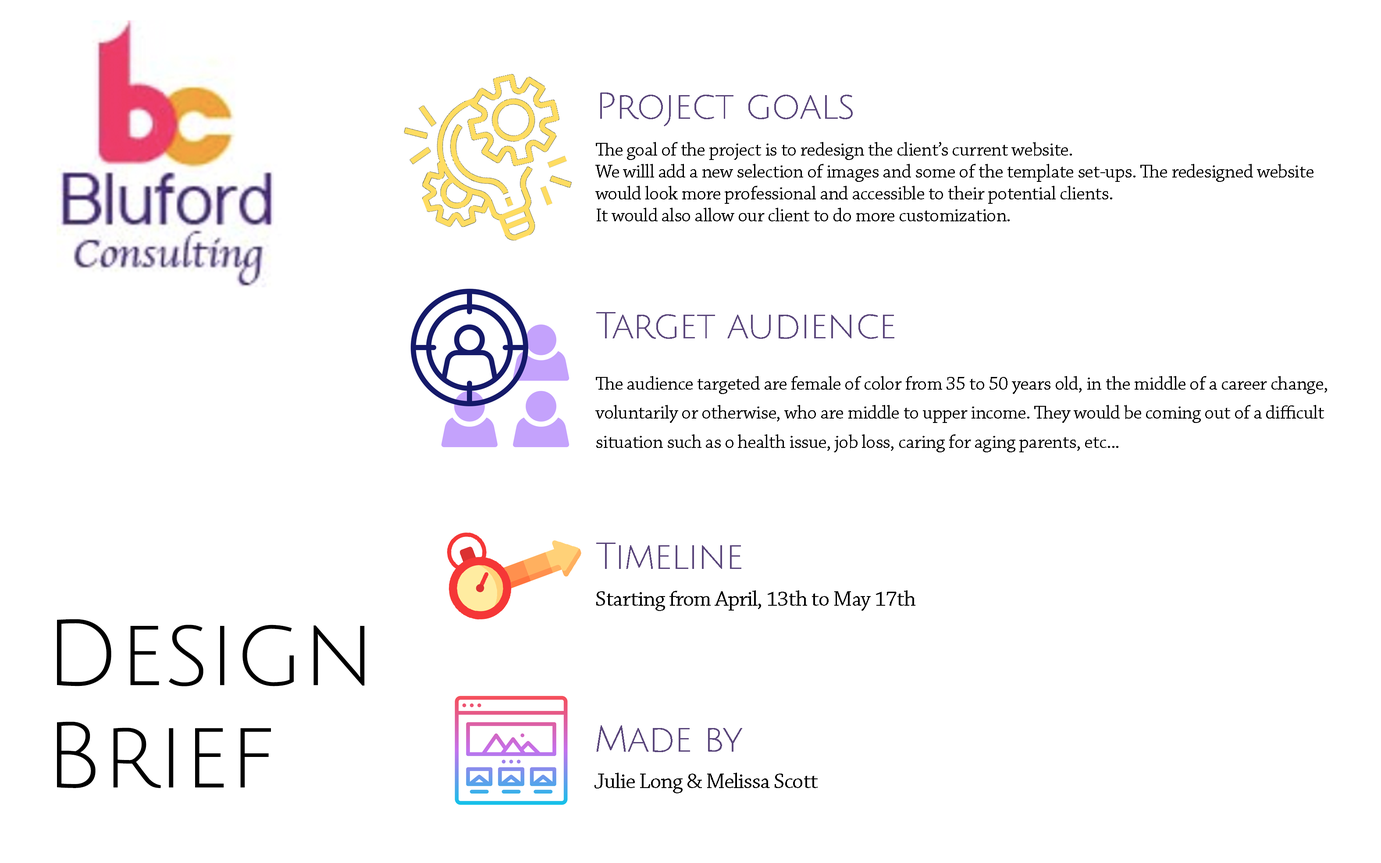
<style>
.page{position:relative;width:1381px;height:863px;background:#ffffff}
.page>*{position:absolute;margin:0}
.t1{font:19.5px/21.9px "ChaparralPro-Regular";letter-spacing:-0.025em;color:#000000}
.t2{font:36.5px/102.3px "JuliusSansOne-Regular";letter-spacing:-0.025em;color:#5b477c}
.t3{font:36.5px/36.5px "JuliusSansOne-Regular";letter-spacing:-0.025em;color:#5b477c}
.t4{font:19.5px/36.5px "ChaparralPro-Regular";letter-spacing:-0.025em;color:#000000}
.t5{font:19.5px/29.2px "ChaparralPro-Regular";letter-spacing:-0.025em;color:#000000}
.t6{font:36.6px/21.9px "JuliusSansOne-Regular";letter-spacing:-0.025em;color:#5b477c}
.t7{font:21.9px/36.5px "ChaparralPro-Regular";letter-spacing:-0.025em;color:#000000}
.t8{font:91.3px/102.3px "JuliusSansOne-Regular";color:#000000}
</style>
<div class="page">
<p class="t1" style="left:595px;top:93px;width:719px;height:128px"><span class="t2">Project goal</span><span class="t3">s<br></span><span class="t4">The goal of the project is to redesign the cli</span>ent’s current website. <br>We willl add a new selection of images and some of the template set-ups. The redesigned website would look more professional and accessible to their potential clients. <br>It would also allow our client to do more customization.</p>
<p class="t5" style="left:595px;top:312px;width:732px;height:140px"><span class="t6">Target audience<br><br></span>The audience targeted are female of color from 35 to 50 years old, in the middle of a career change, voluntarily or otherwise, who are middle to upper income. They would be coming out of a difficult situation such as o health issue, job loss, caring for aging parents, etc...</p>
<p class="t7" style="left:596px;top:543px;width:320px;height:68px"><span class="t3">Timeline<br></span>Starting from April, 13th to May 17th</p>
<p class="t8" style="left:57px;top:619px;width:308px;height:169px">Design <br>Brief</p>
<p class="t7" style="left:595px;top:726px;width:223px;height:68px"><span class="t3">Made by<br></span>Julie Long &amp; Melissa Scott</p>
</div>
